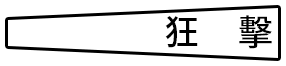
<style>
.page{position:relative;width:286px;height:66px;background:#ffffff}
.page>*{position:absolute;margin:0}
.t1{font:35px "NotoSansCJKtc-Medium";letter-spacing:0.06em;color:#000000}
</style>
<div class="page">
<p class="t1" style="left:165px;top:15px;width:107px;height:34px">狂　擊</p>
</div>
